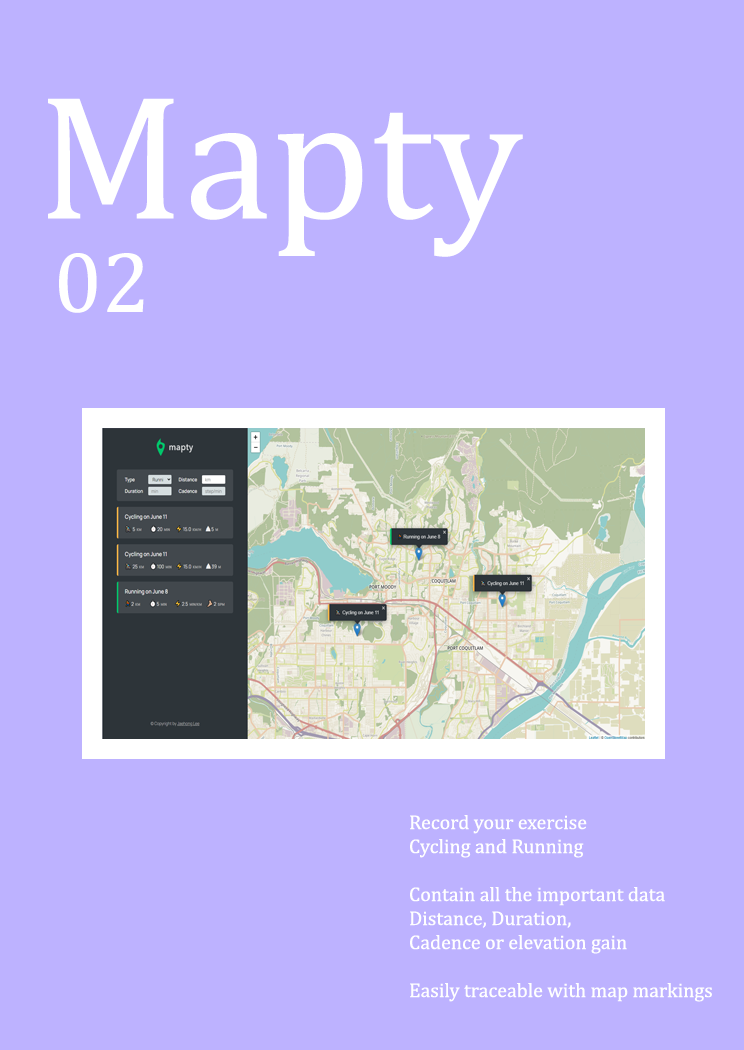
<style>
.page{position:relative;width:744px;height:1050px;background:#bdb2ff}
.page>*{position:absolute;margin:0}
.t1{font:179.3px "Cambria";color:#ffffff}
.t2{font:87.3px "Cambria";color:#ffffff}
.t3{font:20px "Cambria";color:#ffffff}
</style>
<div class="page">
<p class="t1" style="left:48px;top:98px;width:475px;height:159px">Mapty</p>
<p class="t2" style="left:59px;top:253px;width:85px;height:60px">02</p>
<p class="t3" style="left:410px;top:815px;width:302px;height:187px">Record your exercise<br>Cycling and Running<br><br>Contain all the important data<br>Distance, Duration,<br>Cadence or elevation gain<br><br>Easily traceable with map markings</p>
</div>
